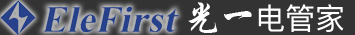
<style>
.page{position:relative;width:355px;height:35px;background:#333333}
.page>*{position:absolute;margin:0}
.t1{font:36px "STXingkai-SC-Bold";color:#ffffff}
.t2{font:30px "PingFangSC-Regular";color:#ffffff}
</style>
<div class="page">
<p class="t1" style="left:188px;top:2px;width:64px;height:31px">光一</p>
<p class="t2" style="left:258px;top:4px;width:86px;height:29px">电管家</p>
</div>
